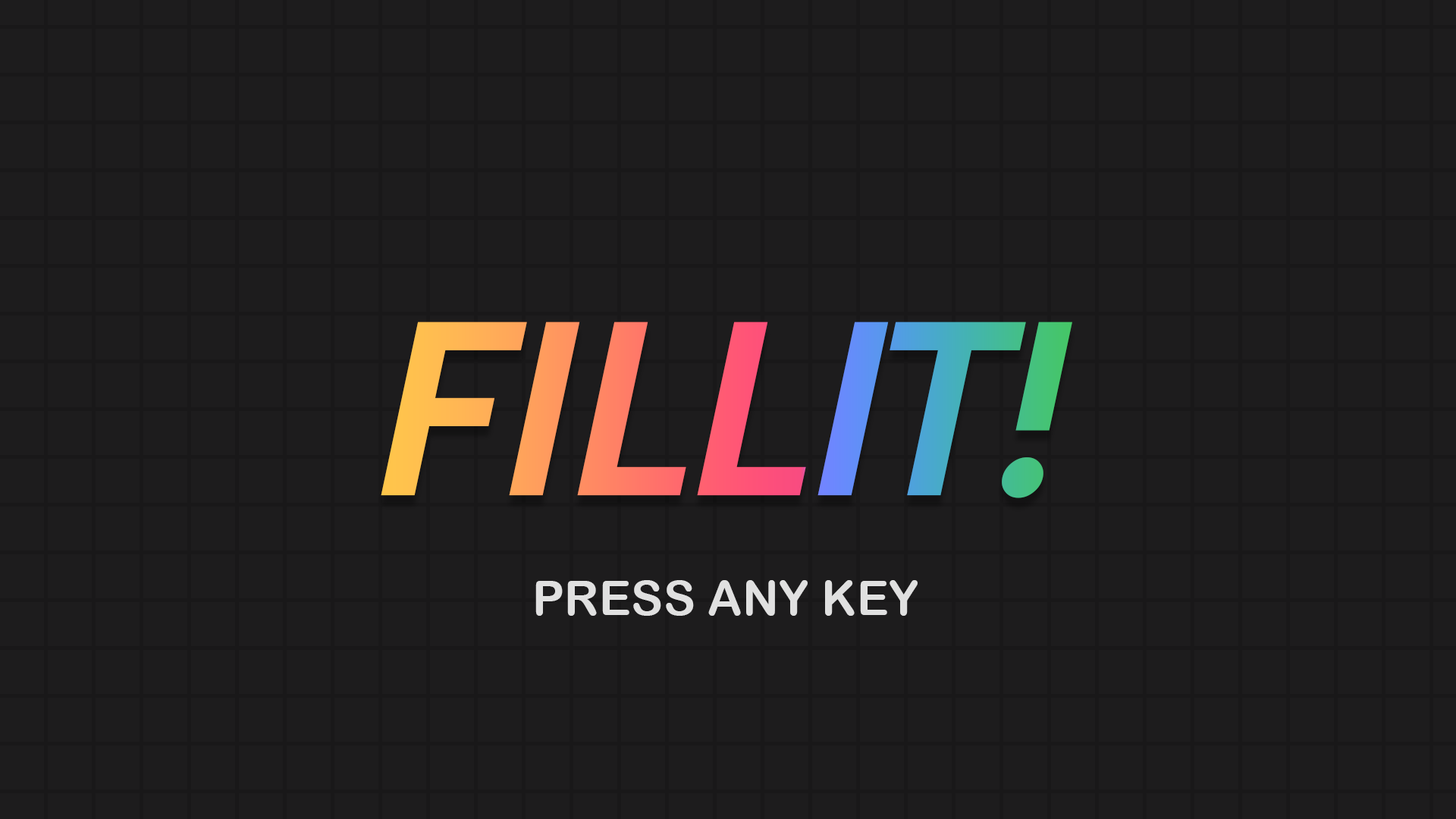
<style>
.page{position:relative;width:1456px;height:819px;background:#1d1c1d}
.page>*{position:absolute;margin:0}
.t1{font:221.2px "JuneExptVariable-Active";letter-spacing:-0.02em}
.t2{font:47.4px "ArialRoundedMTBold";letter-spacing:0.01em;color:#e0e0e0}
</style>
<div class="page">
<p class="t1" style="left:381px;top:322px;width:691px;height:176px">FILLIT!</p>
<p class="t2" style="left:535px;top:580px;width:383px;height:36px">PRESS ANY KEY</p>
</div>
